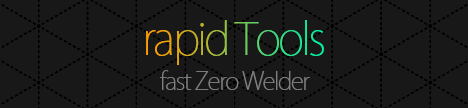
<style>
.page{position:relative;width:468px;height:108px;background:#181818}
.page>*{position:absolute;margin:0}
.t1{font:44.1px "KozGoPr6N-ExtraLight";letter-spacing:-0.06em}
.t2{font:24.1px "KozGoPr6N-ExtraLight";letter-spacing:-0.06em;color:#7f7f7f}
</style>
<div class="page">
<p class="t1" style="left:146px;top:20px;width:178px;height:45px">rapid Tools</p>
<p class="t2" style="left:160px;top:70px;width:150px;height:20px">fast Zero Welder</p>
</div>
